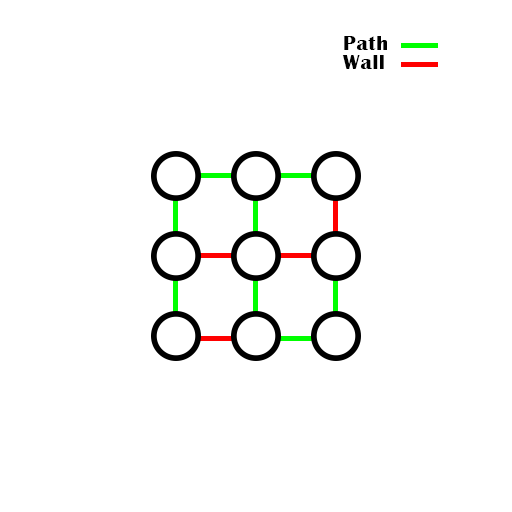
<style>
.page{position:relative;width:512px;height:512px;background:#ffffff}
.page>*{position:absolute;margin:0}
.t1{font:21.3px "BritannicBold";letter-spacing:0.035em;color:#000000}
</style>
<div class="page">
<p class="t1" style="left:344px;top:36px;width:43px;height:14px">Path</p>
<p class="t1" style="left:342px;top:55px;width:42px;height:14px">Wall</p>
</div>
